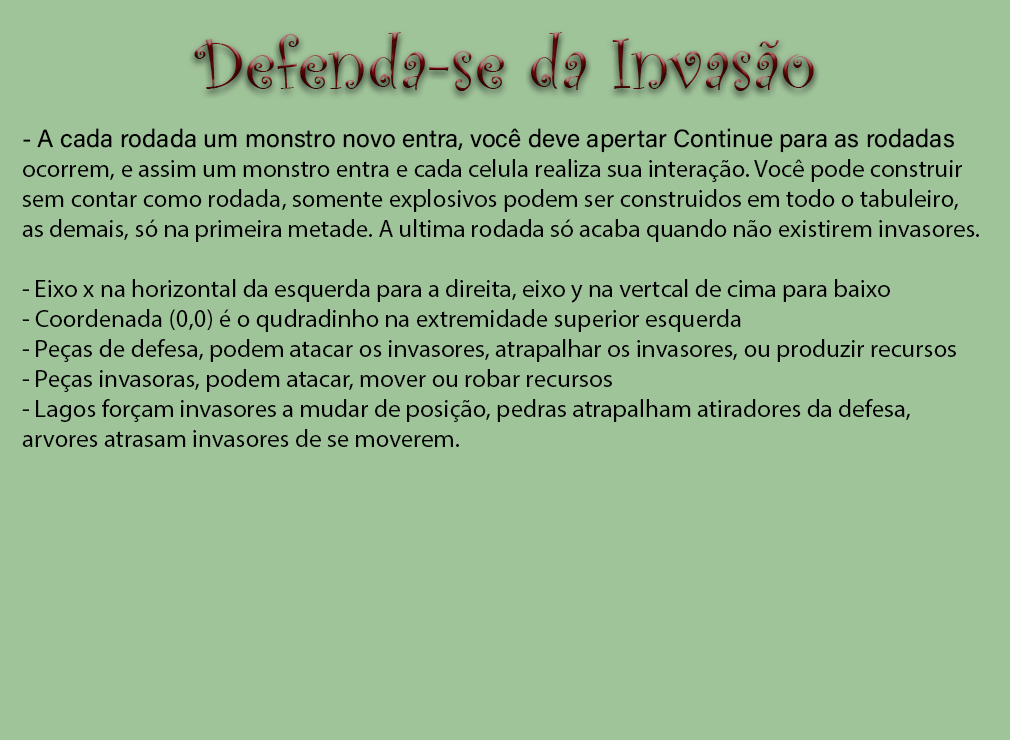
<style>
.page{position:relative;width:1010px;height:740px;background:#a0c49a}
.page>*{position:absolute;margin:0}
.t1{font:75px "CurlzMT"}
.t2{font:25px "MyriadPro-Regular";color:#000000}
.t3{font:25px "AcuminConcept-Regular";color:#000000}
</style>
<div class="page">
<p class="t1" style="left:194px;top:32px;width:620px;height:59px">Defenda-se da Invasão</p>
<p class="t2" style="left:22px;top:128px;width:957px;height:319px"><span class="t3">- A cada rodada um monstro novo entra, você deve apertar Continue para as rodadas<br></span>ocorrem, e assim um monstro entra e cada celula realiza sua interação. Você pode construir <br>sem contar como rodada, somente explosivos podem ser construidos em todo o tabuleiro, <br>as demais, só na primeira metade. A ultima rodada só acaba quando não existirem invasores.<br><br>- Eixo x na horizontal da esquerda para a direita, eixo y na vertcal de cima para baixo<br>- Coordenada (0,0) é o qudradinho na extremidade superior esquerda<br>- Peças de defesa, podem atacar os invasores, atrapalhar os invasores, ou produzir recursos<br>- Peças invasoras, podem atacar, mover ou robar recursos<br>- Lagos forçam invasores a mudar de posição, pedras atrapalham atiradores da defesa,<br>arvores atrasam invasores de se moverem.</p>
</div>
